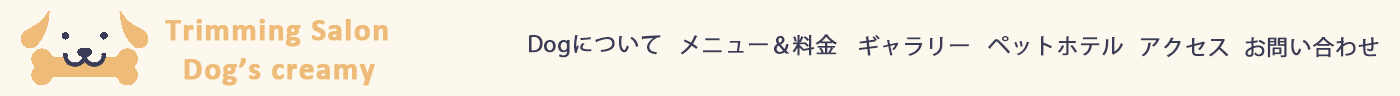
<style>
.page{position:relative;width:1400px;height:96px;background:#fdf8ee}
.page>*{position:absolute;margin:0}
.t1{font:31.2px "Calibri-Bold";letter-spacing:0.025em;color:#eebb79;font-weight:bold}
.t2{font:21.6px "KozGoPr6N-Regular";letter-spacing:0.025em;color:#393b57;font-weight:bold}
</style>
<div class="page">
<p class="t1" style="left:165px;top:19px;width:223px;height:28px">Trimming Salon</p>
<p class="t2" style="left:529px;top:35px;width:132px;height:23px">Dogについて</p>
<p class="t2" style="left:680px;top:34px;width:157px;height:22px">メニュー＆料金</p>
<p class="t2" style="left:859px;top:35px;width:110px;height:21px">ギャラリー</p>
<p class="t2" style="left:988px;top:36px;width:135px;height:20px">ペットホテル</p>
<p class="t2" style="left:1140px;top:37px;width:89px;height:20px">アクセス</p>
<p class="t2" style="left:1245px;top:36px;width:134px;height:22px">お問い合わせ</p>
<p class="t1" style="left:184px;top:58px;width:191px;height:28px">Dog’s creamy</p>
</div>
